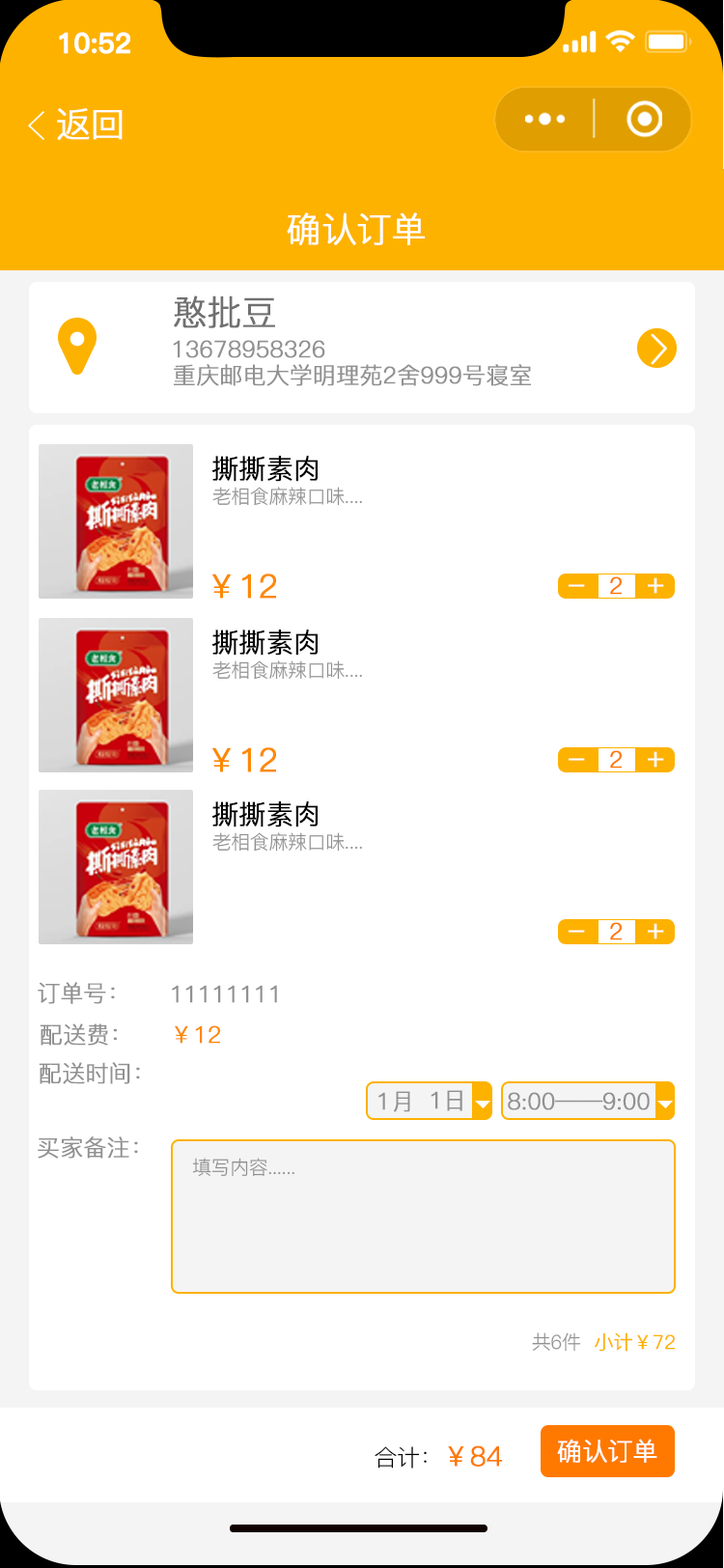
<style>
.page{position:relative;width:724px;height:1568px;background:#ffffff}
.page>*{position:absolute;margin:0}
.t1{font:27.5px "PingFang-SC-Bold";letter-spacing:-0.02em;color:#ffffff;font-weight:bold}
.t2{font:34.8px "PingFang-SC-Regular";letter-spacing:-0.02em;color:#ffffff;font-weight:bold}
.t3{font:34.8px "PingFang-SC-Regular";letter-spacing:-0.02em;color:#707070;font-weight:bold}
.t4{font:23.2px "PingFang-SC-Regular";letter-spacing:-0.02em;color:#919191;font-weight:bold}
.t5{font:27px "PingFang-SC-Regular";letter-spacing:-0.02em;color:#000000;font-weight:bold}
.t6{font:19.3px "PingFang-SC-Regular";letter-spacing:-0.02em;color:#919191}
.t7{font:32.8px "PingFang-SC-Regular";letter-spacing:-0.02em;color:#fd8900;font-weight:bold}
.t8{font:23.2px "PingFang-SC-Regular";letter-spacing:-0.02em;color:#ff7900;font-weight:bold}
.t9{font:29px "PingFang-SC-Regular";letter-spacing:-0.02em;color:#ffffff;font-weight:bold}
.t10{font:23.2px "PingFang-SC-Regular";letter-spacing:-0.02em;color:#fd8900;font-weight:bold}
.t11{font:19.3px "PingFang-SC-Regular";letter-spacing:-0.02em;color:#fdb200;font-weight:bold}
.t12{font:23.2px "PingFang-SC-Regular";letter-spacing:-0.02em;color:#000000}
.t13{font:27px "PingFang-SC-Regular";letter-spacing:-0.02em;color:#ff7900;font-weight:bold}
.t14{font:25.1px "PingFang-SC-Regular";letter-spacing:-0.02em;color:#fefefe;font-weight:bold}
</style>
<div class="page">
<p class="t1" style="left:59px;top:32px;width:71px;height:22px">10:52</p>
<p class="t2" style="left:57px;top:108px;width:66px;height:32px">返回</p>
<p class="t2" style="left:287px;top:212px;width:138px;height:33px">确认订单</p>
<p class="t3" style="left:174px;top:295px;width:101px;height:33px">憨批豆</p>
<p class="t4" style="left:173px;top:340px;width:152px;height:18px">13678958326</p>
<p class="t4" style="left:174px;top:364px;width:357px;height:22px">重庆邮电大学明理苑2舍999号寝室</p>
<p class="t5" style="left:212px;top:456px;width:106px;height:26px">撕撕素肉</p>
<p class="t6" style="left:212px;top:487px;width:150px;height:19px">老相食麻辣口味....</p>
<p class="t7" style="left:212px;top:574px;width:64px;height:25px">￥12</p>
<p class="t8" style="left:610px;top:576px;width:12px;height:19px">2</p>
<p class="t9" style="left:648px;top:577px;width:16px;height:17px">+</p>
<p class="t9" style="left:569px;top:584px;width:16px;height:3px">-</p>
<p class="t5" style="left:212px;top:630px;width:106px;height:26px">撕撕素肉</p>
<p class="t6" style="left:212px;top:660px;width:150px;height:20px">老相食麻辣口味....</p>
<p class="t7" style="left:212px;top:747px;width:64px;height:25px">￥12</p>
<p class="t9" style="left:569px;top:758px;width:16px;height:3px">-</p>
<p class="t8" style="left:610px;top:750px;width:12px;height:19px">2</p>
<p class="t9" style="left:648px;top:751px;width:16px;height:17px">+</p>
<p class="t5" style="left:212px;top:801px;width:106px;height:26px">撕撕素肉</p>
<p class="t6" style="left:212px;top:832px;width:150px;height:20px">老相食麻辣口味....</p>
<p class="t9" style="left:569px;top:930px;width:16px;height:3px">-</p>
<p class="t8" style="left:610px;top:922px;width:12px;height:18px">2</p>
<p class="t9" style="left:648px;top:923px;width:16px;height:16px">+</p>
<p class="t4" style="left:38px;top:982px;width:77px;height:22px">订单号：</p>
<p class="t4" style="left:172px;top:985px;width:105px;height:18px">11111111</p>
<p class="t4" style="left:40px;top:1023px;width:77px;height:23px">配送费：</p>
<p class="t10" style="left:175px;top:1025px;width:45px;height:19px">￥12</p>
<p class="t4" style="left:39px;top:1062px;width:101px;height:22px">配送时间：</p>
<p class="t4" style="left:378px;top:1091px;width:32px;height:21px">1月</p>
<p class="t4" style="left:431px;top:1090px;width:31px;height:21px">1日</p>
<p class="t4" style="left:508px;top:1092px;width:142px;height:18px">8:00——9:00</p>
<p class="t4" style="left:38px;top:1136px;width:100px;height:23px">买家备注：</p>
<p class="t6" style="left:192px;top:1158px;width:102px;height:19px">填写内容......</p>
<p class="t6" style="left:532px;top:1332px;width:49px;height:20px">共6件</p>
<p class="t11" style="left:595px;top:1332px;width:81px;height:20px">小计￥72</p>
<p class="t12" style="left:375px;top:1445px;width:128px;height:24px">合计：<span class="t13">￥84</span></p>
<p class="t14" style="left:557px;top:1439px;width:101px;height:24px">确认订单</p>
</div>
